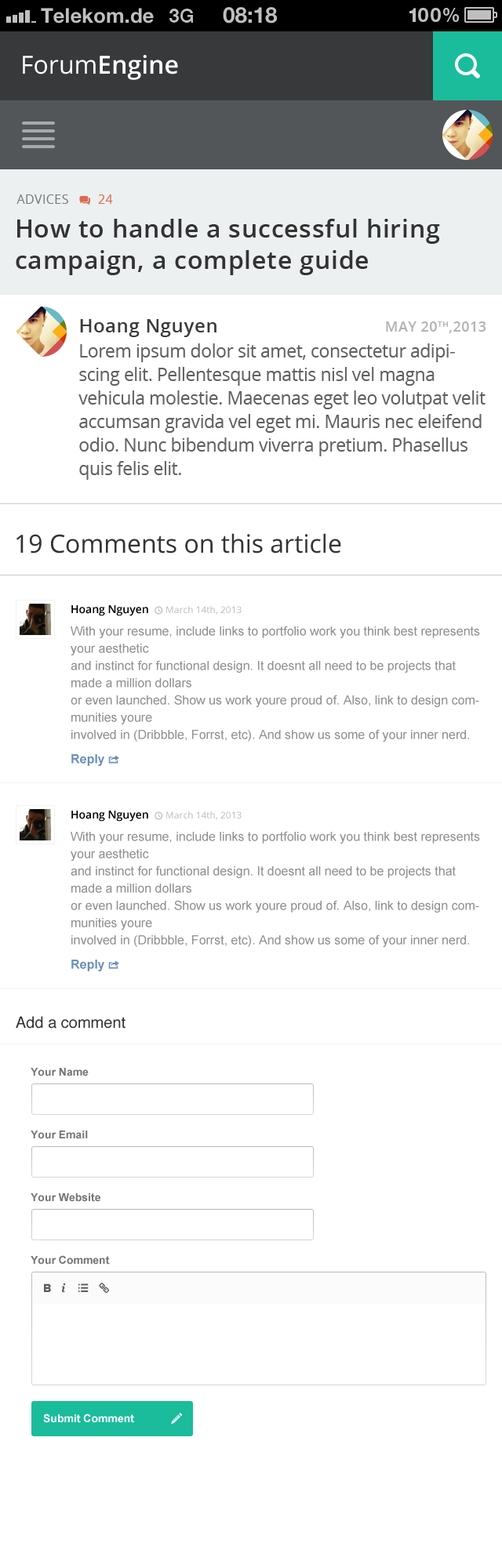
<style>
.page{position:relative;width:502px;height:1568px;background:#ffffff}
.page>*{position:absolute;margin:0}
.t1{font:25.1px "OpenSans-Semibold";color:#ffffff}
.t2{font:25.1px "OpenSans";color:#ffffff}
.t3{font:12.5px "OpenSans";letter-spacing:0.025em;color:#7b7b7b}
.t4{font:12.5px "PictosRIP";letter-spacing:0.025em;color:#dd6951}
.t5{font:12.5px "OpenSans";letter-spacing:0.025em;color:#dd6951}
.t6{font:25.1px/31.4px "OpenSans-Semibold";letter-spacing:0.025em;color:#333333}
.t7{font:18.8px "OpenSans-Semibold";letter-spacing:0.025em;color:#3b3b3b}
.t8{font:14.1px "OpenSans-Semibold";letter-spacing:0.025em;color:#b3b3b3}
.t9{font:18px/23.5px "OpenSans";letter-spacing:-0.02em;color:#606060}
.t10{font:25.1px "OpenSans";color:#333333}
.t11{font:9.4px "OpenSans";color:#bbbbbb}
.t12{font:11px "OpenSans-Semibold";color:#000000}
.t13{font:9.4px "PictosRIP";color:#bbbbbb}
.t14{font:12.5px/17.2px "ArialMT";color:#909090}
.t15{font:12.5px/16.5px "Arial-BoldMT";color:#6a90ba}
.t16{font:12.5px/16.5px "PictosRIP";color:#6a90ba}
.t17{font:15.7px "Helvetica";color:#333333}
.t18{font:11px "Arial-BoldMT";color:#767676}
.t19{font:11.8px "ProximaNova-Extrabld";color:#5c5c5c}
.t20{font:11.8px "Georgia-BoldItalic";color:#5c5c5c}
.t21{font:11.8px "PictosRIP";color:#5c5c5c}
.t22{font:11px "Arial-BoldMT";color:#ffffff}
.t23{font:13.3px "PictosRIP";color:#ffffff}
</style>
<div class="page">
<p class="t1" style="left:23px;top:55px;width:155px;height:25px"><span class="t2">Forum</span>Engine</p>
<p class="t3" style="left:16px;top:194px;width:97px;height:11px">ADVICES   <span class="t4">q </span><span class="t5">24</span></p>
<p class="t6" style="left:16px;top:219px;width:424px;height:56px">How to handle a successful hiring campaign, a complete guide</p>
<p class="t7" style="left:80px;top:319px;width:136px;height:18px">Hoang Nguyen</p>
<p class="t8" style="left:386px;top:321px;width:100px;height:12px">MAY 20TH,2013</p>
<p class="t9" style="left:78px;top:343px;width:407px;height:137px">Lorem ipsum dolor sit amet, consectetur adipiscing elit. Pellentesque mattis nisl vel magna vehicula molestie. Maecenas eget leo volutpat velit accumsan gravida vel eget mi. Mauris nec eleifend odio. Nunc bibendum viverra pretium. Phasellus quis felis elit.</p>
<p class="t10" style="left:16px;top:533px;width:325px;height:21px">19 Comments on this article</p>
<p class="t11" style="left:71px;top:605px;width:170px;height:11px"><span class="t12">Hoang Nguyen  </span><span class="t13">t </span>March 14th, 2013</p>
<p class="t14" style="left:71px;top:626px;width:409px;height:140px">With your resume, include links to portfolio work you think best represents your aesthetic <br>and instinct for functional design. It doesnt all need to be projects that made a million dollars<br>or even launched. Show us work youre proud of. Also, link to design communities youre <br>involved in (Dribbble, Forrst, etc). And show us some of your inner nerd.<br><br><span class="t15">Reply </span><span class="t16">R</span></p>
<p class="t17" style="left:16px;top:1016px;width:109px;height:13px">Add a comment</p>
<p class="t18" style="left:31px;top:1068px;width:58px;height:8px">Your Name</p>
<p class="t18" style="left:31px;top:1131px;width:57px;height:8px">Your Email</p>
<p class="t18" style="left:31px;top:1193px;width:69px;height:9px">Your Website</p>
<p class="t18" style="left:31px;top:1255px;width:79px;height:10px">Your Comment</p>
<p class="t19" style="left:44px;top:1283px;width:7px;height:9px">B</p>
<p class="t20" style="left:61px;top:1283px;width:5px;height:10px">i</p>
<p class="t21" style="left:78px;top:1283px;width:11px;height:9px">l</p>
<p class="t21" style="left:99px;top:1283px;width:10px;height:10px">A</p>
<p class="t22" style="left:43px;top:1414px;width:91px;height:9px">Submit Comment</p>
<p class="t23" style="left:171px;top:1413px;width:12px;height:12px">p</p>
</div>
